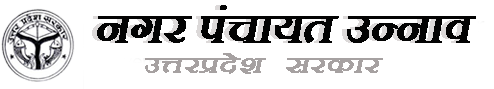
<style>
.page{position:relative;width:494px;height:89px;background:#ffffff}
.page>*{position:absolute;margin:0}
.t1{font:52px "Aparajita";color:#030303;font-weight:bold;font-style:italic}
.t2{font:27.3px "Aparajita";color:#a6a1a1;font-weight:bold;font-style:italic;scale:1.32 1}
</style>
<div class="page">
<p class="t1" style="left:97px;top:5px;width:379px;height:38px">नगर पंचायत उन्नाव</p>
<p class="t2" style="left:145px;top:53px;width:238px;height:21px">उत्तरप्रदेश  सरकार</p>
</div>
